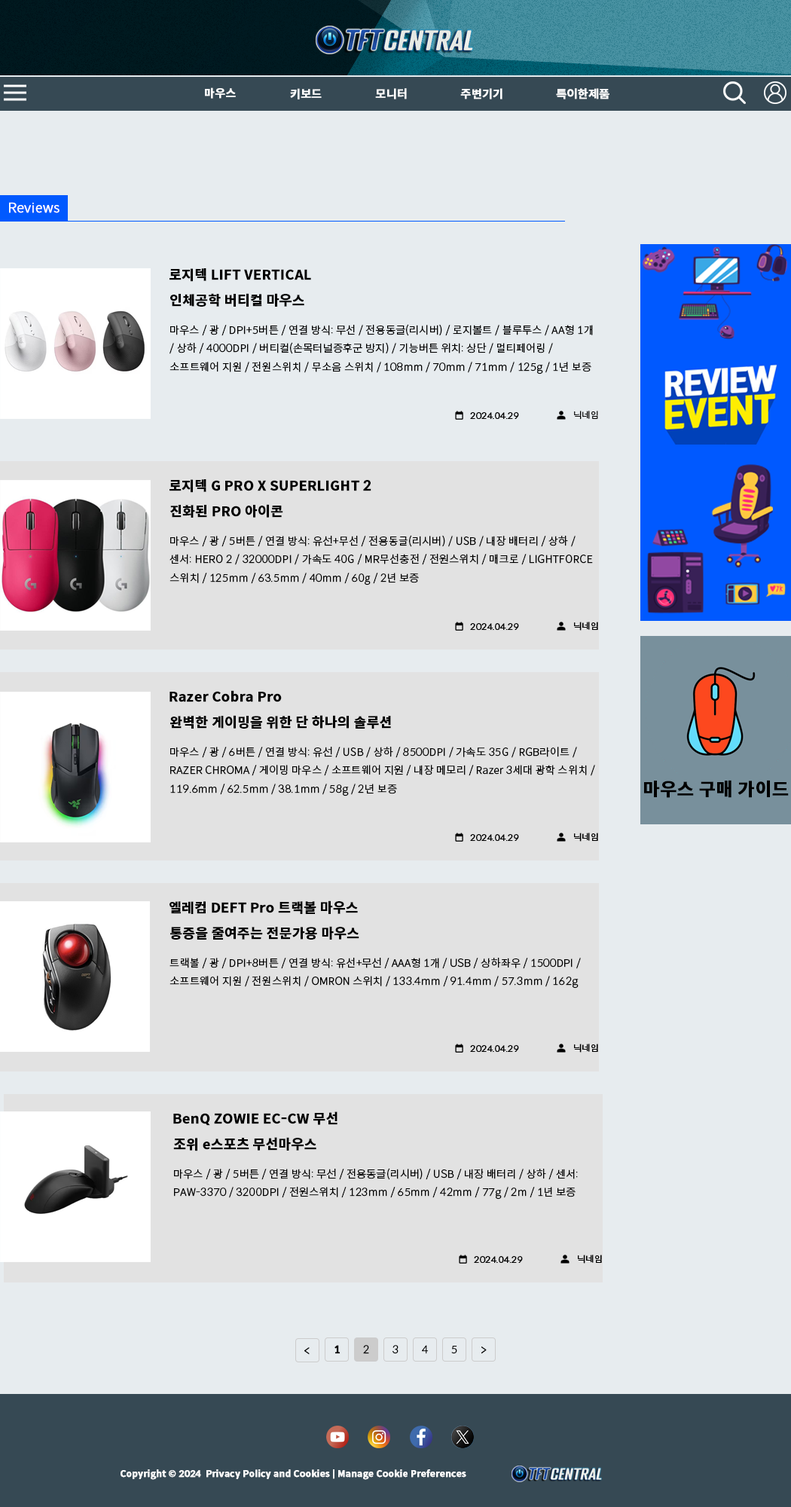
<style>
.page{position:relative;width:791px;height:1507px;background:#e7ecef}
.page>*{position:absolute;margin:0}
.t1{font:11.3px "SpoqaHanSansNeo-Bold";color:#ffffff;font-weight:bold}
.t2{font:13.6px "SpoqaHanSansNeo-Light";color:#ffffff;font-weight:bold}
.t3{font:13.6px "SpoqaHanSansNeo-Bold";color:#000000;font-weight:bold}
.t4{font:10.5px "SpoqaHanSansNeo-Light";color:#000000;font-weight:bold}
.t5{font:9px "SpoqaHanSansNeo-Light";color:#000000;font-weight:bold}
.t6{font:12.1px "SpoqaHanSansNeo-Light";color:#000000;font-weight:bold}
.t7{font:10.5px "SpoqaHanSansNeo-Bold";color:#000000;font-weight:bold}
.t8{font:9px "SpoqaHanSansNeo-Bold";color:#ffffff;font-weight:bold}
</style>
<div class="page">
<p class="t1" style="left:205px;top:87px;width:31px;height:12px">마우스</p>
<p class="t1" style="left:290px;top:88px;width:32px;height:11px">키보드</p>
<p class="t1" style="left:375px;top:88px;width:32px;height:11px">모니터</p>
<p class="t1" style="left:460px;top:88px;width:43px;height:11px">주변기기</p>
<p class="t1" style="left:556px;top:88px;width:54px;height:11px">특이한제품</p>
<p class="t2" style="left:9px;top:202px;width:51px;height:11px">Reviews</p>
<p class="t3" style="left:170px;top:268px;width:141px;height:14px">로지텍 LIFT VERTICAL</p>
<p class="t3" style="left:170px;top:293px;width:134px;height:14px">인체공학 버티컬 마우스</p>
<p class="t4" style="left:170px;top:324px;width:423px;height:51px">마우스 / 광 / DPI+5버튼 / 연결 방식: 무선 / 전용동글(리시버) / 로지볼트 / 블루투스 / AA형 1개 / 상하 / 4000DPI / 버티컬(손목터널증후군 방지) / 기능버튼 위치: 상단 / 멀티페어링 / 소프트웨어 지원 / 전원스위치 / 무소음 스위치 / 108mm / 70mm / 71mm / 125g / 1년 보증</p>
<p class="t5" style="left:470px;top:412px;width:49px;height:7px">2024.04.29</p>
<p class="t5" style="left:574px;top:411px;width:24px;height:9px">닉네임</p>
<p class="t3" style="left:170px;top:479px;width:201px;height:14px">로지텍 G PRO X SUPERLIGHT 2</p>
<p class="t3" style="left:170px;top:504px;width:113px;height:14px">진화된 PRO 아이콘</p>
<p class="t4" style="left:170px;top:535px;width:423px;height:51px">마우스 / 광 / 5버튼 / 연결 방식: 유선+무선 / 전용동글(리시버) / USB / 내장 배터리 / 상하 / 센서: HERO 2 / 32000DPI / 가속도 40G / MR무선충전 / 전원스위치 / 매크로 / LIGHTFORCE 스위치 / 125mm / 63.5mm / 40mm / 60g / 2년 보증</p>
<p class="t5" style="left:470px;top:623px;width:49px;height:7px">2024.04.29</p>
<p class="t5" style="left:574px;top:622px;width:24px;height:9px">닉네임</p>
<p class="t3" style="left:170px;top:690px;width:112px;height:12px">Razer Cobra Pro</p>
<p class="t3" style="left:170px;top:715px;width:221px;height:14px">완벽한 게이밍을 위한 단 하나의 솔루션</p>
<p class="t4" style="left:170px;top:747px;width:425px;height:49px">마우스 / 광 / 6버튼 / 연결 방식: 유선 / USB / 상하 / 8500DPI / 가속도 35G / RGB라이트 / RAZER CHROMA / 게이밍 마우스 / 소프트웨어 지원 / 내장 메모리 / Razer 3세대 광학 스위치 / 119.6mm / 62.5mm / 38.1mm / 58g / 2년 보증</p>
<p class="t5" style="left:574px;top:833px;width:24px;height:9px">닉네임</p>
<p class="t5" style="left:470px;top:834px;width:49px;height:7px">2024.04.29</p>
<p class="t3" style="left:170px;top:900px;width:188px;height:14px">엘레컴 DEFT Pro 트랙볼 마우스</p>
<p class="t3" style="left:170px;top:926px;width:189px;height:14px">통증을 줄여주는 전문가용 마우스</p>
<p class="t4" style="left:170px;top:958px;width:411px;height:31px">트랙볼 / 광 / DPI+8버튼 / 연결 방식: 유선+무선 / AAA형 1개 / USB / 상하좌우 / 1500DPI / 소프트웨어 지원 / 전원스위치 / OMRON 스위치 / 133.4mm / 91.4mm / 57.3mm / 162g</p>
<p class="t5" style="left:470px;top:1045px;width:49px;height:7px">2024.04.29</p>
<p class="t5" style="left:574px;top:1044px;width:24px;height:9px">닉네임</p>
<p class="t3" style="left:173px;top:1111px;width:165px;height:15px">BenQ ZOWIE EC-CW 무선</p>
<p class="t3" style="left:173px;top:1137px;width:143px;height:14px">조위 e스포츠 무선마우스</p>
<p class="t4" style="left:174px;top:1168px;width:404px;height:32px">마우스 / 광 / 5버튼 / 연결 방식: 무선 / 전용동글(리시버) / USB / 내장 배터리 / 상하 / 센서: PAW-3370 / 3200DPI / 전원스위치 / 123mm / 65mm / 42mm / 77g / 2m / 1년 보증</p>
<p class="t5" style="left:474px;top:1256px;width:49px;height:7px">2024.04.29</p>
<p class="t5" style="left:578px;top:1255px;width:24px;height:9px">닉네임</p>
<p class="t6" style="left:304px;top:1347px;width:6px;height:8px">&lt;</p>
<p class="t7" style="left:335px;top:1345px;width:6px;height:9px">1</p>
<p class="t4" style="left:363px;top:1345px;width:6px;height:9px">2</p>
<p class="t4" style="left:393px;top:1345px;width:6px;height:9px">3</p>
<p class="t4" style="left:422px;top:1345px;width:7px;height:9px">4</p>
<p class="t4" style="left:451px;top:1346px;width:6px;height:8px">5</p>
<p class="t6" style="left:482px;top:1347px;width:5px;height:7px">&gt;</p>
<p class="t8" style="left:121px;top:1469px;width:345px;height:11px">Copyright © 2024  Privacy Policy and Cookies | Manage Cookie Preferences</p>
</div>
